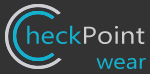
<style>
.page{position:relative;width:150px;height:74px;background:#333333}
.page>*{position:absolute;margin:0}
.t1{font:24.3px "MyanmarText";color:#cfcfcf;scale:1.14 1}
.t2{font:24.3px "MyanmarText";color:#13b1cd;scale:1.14 1}
.t3{font:20.8px "MyanmarText";color:#13b1cd;scale:1.14 1}
</style>
<div class="page">
<p class="t1" style="left:27px;top:25px;width:119px;height:44px"><span class="t2">heck</span>Point<br>           <span class="t3">wear</span></p>
</div>
